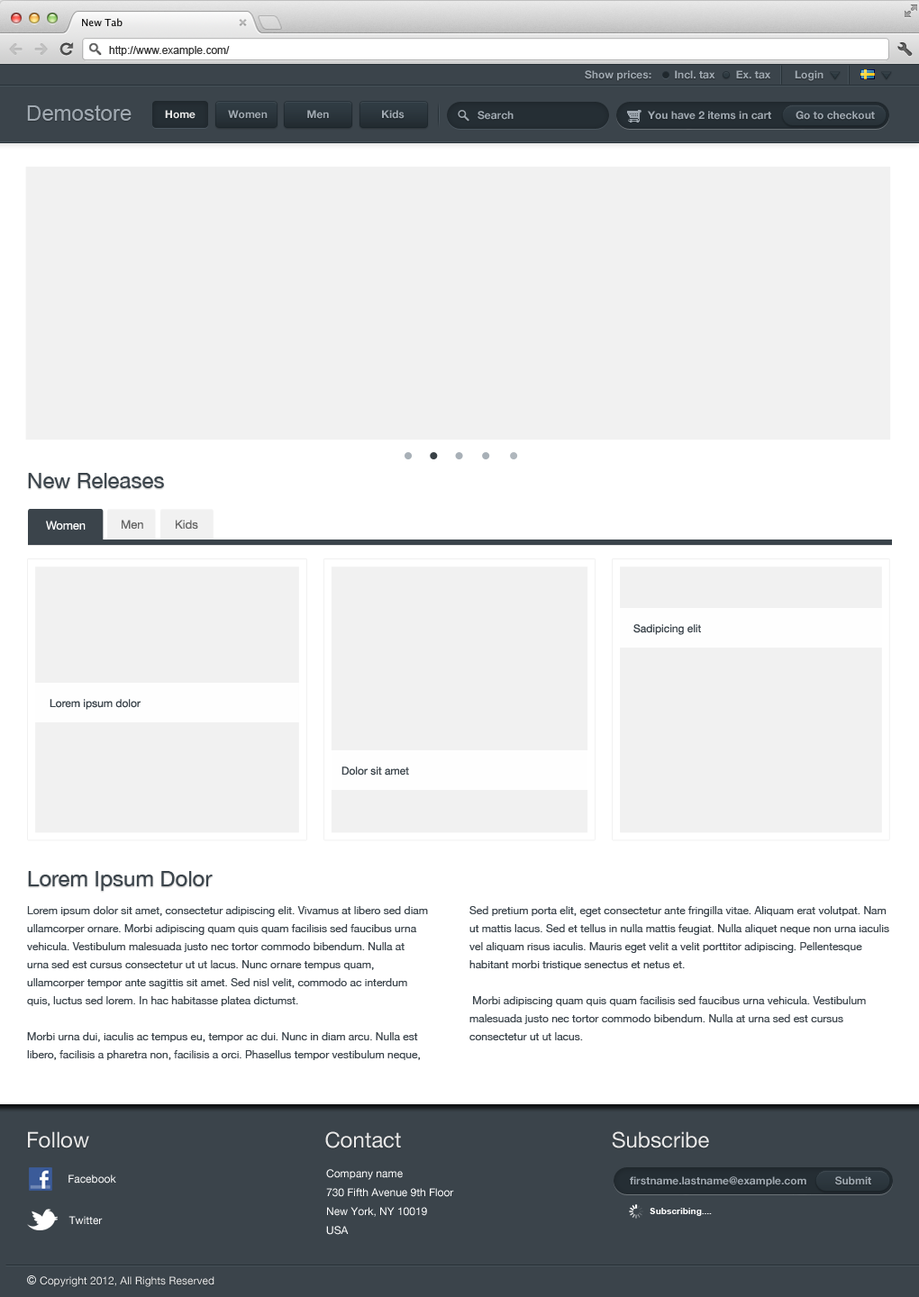
<style>
.page{position:relative;width:919px;height:1297px;background:#f1f1f1}
.page>*{position:absolute;margin:0}
.t1{font:10.8px "ArialMT";color:#353535}
.t2{font:10.8px "HelveticaNeue-Bold";color:#9fa8b0}
.t3{font:21.6px "ArialMT";color:#a0a9b1}
.t4{font:10.8px "HelveticaNeue-Bold";color:#e8e8e8}
.t5{font:10.8px "HelveticaNeue-Bold";color:#a0a9b1}
.t6{font:21.6px "HelveticaNeue";color:#3b444b}
.t7{font:11.7px "HelveticaNeue";color:#ffffff}
.t8{font:11.7px "HelveticaNeue";color:#666666}
.t9{font:10.8px "HelveticaNeue";color:#3b444b}
.t10{font:10.8px/18px "HelveticaNeue";color:#3b444b}
.t11{font:21.6px "HelveticaNeue";color:#e8e8e8}
.t12{font:10.8px/18.9px "HelveticaNeue";color:#ffffff}
.t13{font:10.8px "HelveticaNeue";color:#ffffff}
.t14{font:9px "Arial-BoldMT";color:#ffffff}
.t15{font:10.8px "HelveticaNeue";color:#e8e8e8}
</style>
<div class="page">
<p class="t1" style="left:109px;top:46px;width:121px;height:10px">http://www.example.com/</p>
<p class="t2" style="left:585px;top:70px;width:66px;height:11px">Show prices:</p>
<p class="t2" style="left:675px;top:70px;width:40px;height:9px">Incl. tax</p>
<p class="t2" style="left:736px;top:70px;width:35px;height:9px">Ex. tax</p>
<p class="t2" style="left:795px;top:70px;width:29px;height:11px">Login</p>
<p class="t3" style="left:27px;top:105px;width:105px;height:16px">Demostore</p>
<p class="t4" style="left:165px;top:110px;width:31px;height:9px">Home</p>
<p class="t2" style="left:228px;top:110px;width:40px;height:9px">Women</p>
<p class="t5" style="left:307px;top:110px;width:22px;height:9px">Men</p>
<p class="t5" style="left:382px;top:110px;width:23px;height:9px">Kids</p>
<p class="t2" style="left:478px;top:111px;width:36px;height:9px">Search</p>
<p class="t2" style="left:647px;top:111px;width:124px;height:9px">You have 2 items in cart</p>
<p class="t2" style="left:796px;top:111px;width:79px;height:9px">Go to checkout</p>
<p class="t6" style="left:28px;top:473px;width:136px;height:15px">New Releases</p>
<p class="t7" style="left:46px;top:521px;width:40px;height:10px">Women</p>
<p class="t8" style="left:122px;top:520px;width:21px;height:10px">Men</p>
<p class="t8" style="left:176px;top:520px;width:22px;height:10px">Kids</p>
<p class="t9" style="left:633px;top:624px;width:68px;height:11px">Sadipicing elit</p>
<p class="t9" style="left:50px;top:699px;width:91px;height:11px">Lorem ipsum dolor</p>
<p class="t9" style="left:341px;top:767px;width:68px;height:9px">Dolor sit amet</p>
<p class="t6" style="left:28px;top:871px;width:185px;height:20px">Lorem Ipsum Dolor</p>
<p class="t10" style="left:27px;top:906px;width:401px;height:155px">Lorem ipsum dolor sit amet, consectetur adipiscing elit. Vivamus at libero sed diam ullamcorper ornare. Morbi adipiscing quam quis quam facilisis sed faucibus urna vehicula. Vestibulum malesuada justo nec tortor commodo bibendum. Nulla at urna sed est cursus consectetur ut ut lacus. Nunc ornare tempus quam, ullamcorper tempor ante sagittis sit amet. Sed nisl velit, commodo ac interdum quis, luctus sed lorem. In hac habitasse platea dictumst.<br><br>Morbi urna dui, iaculis ac tempus eu, tempor ac dui. Nunc in diam arcu. Nulla est libero, facilisis a pharetra non, facilisis a orci. Phasellus tempor vestibulum neque, sit amet facilisis sem commodo quis.</p>
<p class="t10" style="left:469px;top:906px;width:420px;height:135px">Sed pretium porta elit, eget consectetur ante fringilla vitae. Aliquam erat volutpat. Nam ut mattis lacus. Sed et tellus in nulla mattis feugiat. Nulla aliquet neque non urna iaculis vel aliquam risus iaculis. Mauris eget velit a velit porttitor adipiscing. Pellentesque habitant morbi tristique senectus et netus et.<br><br> Morbi adipiscing quam quis quam facilisis sed faucibus urna vehicula. Vestibulum malesuada justo nec tortor commodo bibendum. Nulla at urna sed est cursus consectetur ut ut lacus.</p>
<p class="t11" style="left:28px;top:1132px;width:61px;height:17px">Follow</p>
<p class="t11" style="left:325px;top:1132px;width:76px;height:17px">Contact</p>
<p class="t11" style="left:612px;top:1132px;width:97px;height:17px">Subscribe</p>
<p class="t12" style="left:326px;top:1170px;width:128px;height:65px">Company name<br>730 Fifth Avenue 9th Floor<br>New York, NY 10019<br>USA</p>
<p class="t13" style="left:68px;top:1175px;width:48px;height:9px">Facebook</p>
<p class="t2" style="left:630px;top:1177px;width:176px;height:11px">firstname.lastname@example.com</p>
<p class="t2" style="left:835px;top:1177px;width:36px;height:9px">Submit</p>
<p class="t13" style="left:68px;top:1216px;width:35px;height:9px">Twitter</p>
<p class="t14" style="left:650px;top:1208px;width:62px;height:8px">Subscribing....</p>
<p class="t15" style="left:40px;top:1277px;width:174px;height:11px">Copyright 2012, All Rights Reserved</p>
</div>
